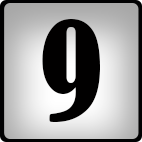
<style>
.page{position:relative;width:142px;height:142px}
.page>*{position:absolute;margin:0}
.t1{font:129.4px "BernardMT-Condensed";color:#010000}
</style>
<div class="page">
<p class="t1" style="left:42px;top:19px;width:58px;height:103px">9</p>
</div>
